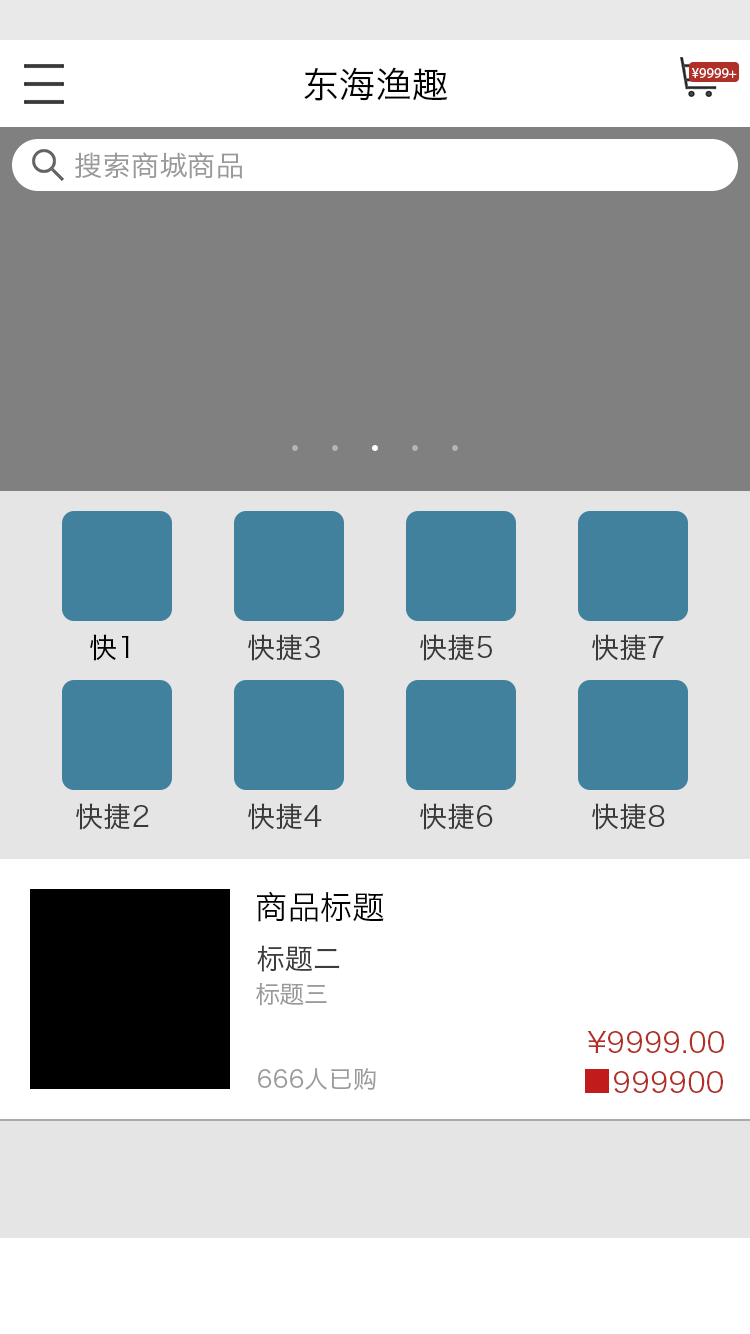
<style>
.page{position:relative;width:750px;height:1334px;background:#ffffff}
.page>*{position:absolute;margin:0}
.t1{font:36px "HiraginoSansGB-W3";color:#000000}
.t2{font:14px "MyriadPro-Regular";letter-spacing:0.01em;color:#ffffff}
.t3{font:28px "HiraginoSansGB-W3";color:#9a9a9a}
.t4{font:28px "HiraginoSansGB-W3";color:#000000}
.t5{font:28px "HiraginoSansGB-W3";color:#393939}
.t6{font:32px "HiraginoSansGB-W3";color:#000000}
.t7{font:28px "HiraginoSansGB-W3";color:#3d3d3d}
.t8{font:24px "HiraginoSansGB-W3";color:#9a9a9a}
.t9{font:28px "HiraginoSansGB-W3";color:#b12f27}
</style>
<div class="page">
<p class="t1" style="left:304px;top:67px;width:144px;height:34px">东海渔趣</p>
<p class="t2" style="left:692px;top:68px;width:45px;height:10px">¥9999+</p>
<p class="t3" style="left:75px;top:152px;width:167px;height:27px">搜索商城商品</p>
<p class="t4" style="left:90px;top:634px;width:39px;height:27px">快1</p>
<p class="t5" style="left:248px;top:634px;width:72px;height:27px">快捷3</p>
<p class="t5" style="left:420px;top:634px;width:72px;height:27px">快捷5</p>
<p class="t5" style="left:592px;top:634px;width:72px;height:27px">快捷7</p>
<p class="t5" style="left:76px;top:803px;width:73px;height:27px">快捷2</p>
<p class="t5" style="left:248px;top:803px;width:74px;height:27px">快捷4</p>
<p class="t5" style="left:420px;top:803px;width:73px;height:27px">快捷6</p>
<p class="t5" style="left:592px;top:803px;width:73px;height:27px">快捷8</p>
<p class="t6" style="left:257px;top:891px;width:127px;height:31px">商品标题</p>
<p class="t7" style="left:257px;top:945px;width:83px;height:27px">标题二</p>
<p class="t8" style="left:256px;top:983px;width:71px;height:23px">标题三</p>
<p class="t9" style="left:587px;top:1031px;width:137px;height:22px">¥9999.00</p>
<p class="t8" style="left:258px;top:1068px;width:118px;height:23px">666人已购</p>
<p class="t9" style="left:614px;top:1071px;width:109px;height:22px">999900</p>
</div>
